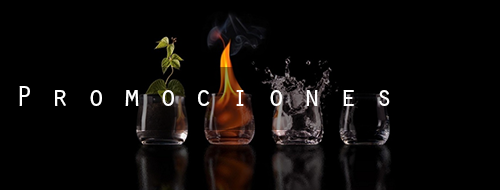
<style>
.page{position:relative;width:500px;height:190px;background:#000000}
.page>*{position:absolute;margin:0}
.t1{font:30px "OratorStd";color:#ffffff}
</style>
<div class="page">
<p class="t1" style="left:19px;top:86px;width:371px;height:20px">P r o m o c i o n e s</p>
</div>
